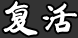
<style>
.page{position:relative;width:78px;height:38px;background:#333333}
.page>*{position:absolute;margin:0}
.t1{font:38px "Tensentype-FanXiaoGeKaiShuJ";color:#ffffff;font-weight:bold}
</style>
<div class="page">
<p class="t1" style="left:3px;top:1px;width:74px;height:35px">复活</p>
</div>
